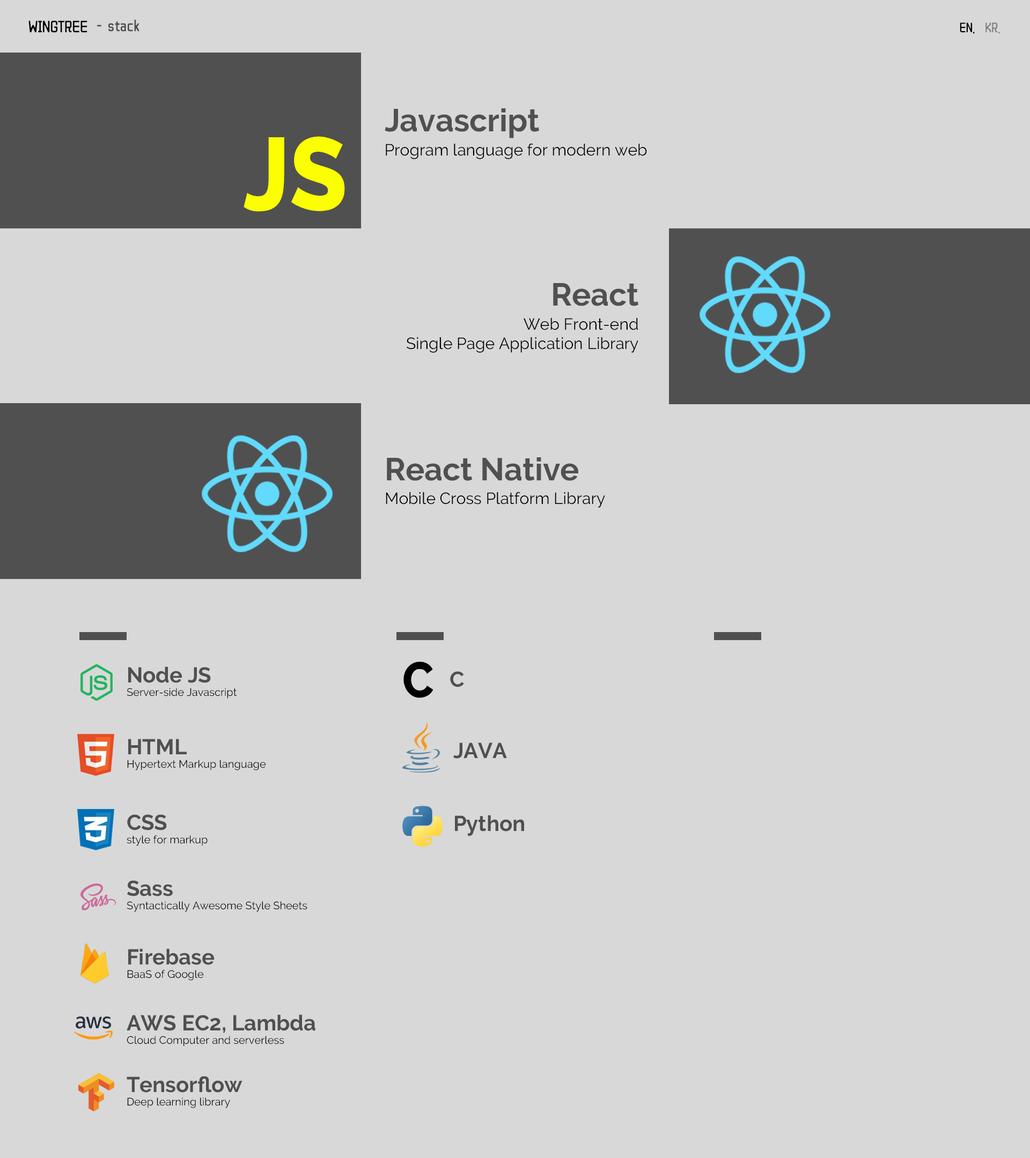
<style>
.page{position:relative;width:1030px;height:1158px;background:#d8d8d8}
.page>*{position:absolute;margin:0}
.t1{font:16.1px "ZCOOLQingKeHuangYou-Regular";color:#000000}
.t2{font:16.1px "ZCOOLQingKeHuangYou-Regular";color:#505050}
.t3{font:13.4px "ZCOOLQingKeHuangYou-Regular";color:#000000}
.t4{font:13.4px "ZCOOLQingKeHuangYou-Regular";color:#808080}
.t5{font:31.6px "Raleway-Bold";color:#505050}
.t6{font:102.6px "Raleway-ExtraBold";color:#fcff00;scale:0.91 1}
.t7{font:16.1px "Raleway-Regular";color:#000000}
.t8{font:50.1px "Raleway-ExtraBold";color:#000000;scale:0.91 1}
.t9{font:21.4px "Raleway-Bold";color:#505050}
.t10{font:10.7px "Raleway-Regular";color:#000000}
</style>
<div class="page">
<p class="t1" style="left:28px;top:20px;width:59px;height:13px">WINGTREE</p>
<p class="t2" style="left:97px;top:19px;width:42px;height:13px">-  stack</p>
<p class="t3" style="left:959px;top:23px;width:41px;height:11px">EN.    <span class="t4">KR.</span></p>
<p class="t5" style="left:384px;top:108px;width:155px;height:30px">Javascript</p>
<p class="t6" style="left:243px;top:136px;width:102px;height:76px">JS</p>
<p class="t7" style="left:386px;top:143px;width:261px;height:16px">Program language for modern web</p>
<p class="t5" style="left:553px;top:283px;width:86px;height:23px">React</p>
<p class="t7" style="left:406px;top:318px;width:232px;height:35px;text-align:right">Web Front-end<br>Single Page Application Library</p>
<p class="t5" style="left:387px;top:457px;width:191px;height:24px">React Native</p>
<p class="t7" style="left:386px;top:492px;width:219px;height:16px">Mobile Cross Platform Library</p>
<p class="t8" style="left:403px;top:662px;width:30px;height:36px">C</p>
<p class="t9" style="left:128px;top:667px;width:83px;height:16px">Node JS</p>
<p class="t9" style="left:450px;top:671px;width:14px;height:16px">C</p>
<p class="t10" style="left:127px;top:688px;width:110px;height:11px">Server-side Javascript</p>
<p class="t9" style="left:128px;top:739px;width:59px;height:15px">HTML</p>
<p class="t9" style="left:453px;top:743px;width:54px;height:16px">JAVA</p>
<p class="t10" style="left:127px;top:760px;width:139px;height:11px">Hypertext Markup language</p>
<p class="t9" style="left:127px;top:815px;width:40px;height:16px">CSS</p>
<p class="t9" style="left:455px;top:815px;width:69px;height:21px">Python</p>
<p class="t10" style="left:127px;top:835px;width:81px;height:11px">style for markup</p>
<p class="t9" style="left:127px;top:880px;width:46px;height:17px">Sass</p>
<p class="t10" style="left:127px;top:901px;width:180px;height:11px">Syntactically Awesome Style Sheets</p>
<p class="t9" style="left:128px;top:949px;width:86px;height:16px">Firebase</p>
<p class="t10" style="left:127px;top:970px;width:77px;height:11px">BaaS of Google</p>
<p class="t9" style="left:127px;top:1015px;width:188px;height:18px">AWS EC2, Lambda</p>
<p class="t10" style="left:127px;top:1036px;width:157px;height:11px">Cloud Computer and serverless</p>
<p class="t9" style="left:127px;top:1076px;width:115px;height:17px">Tensorflow</p>
<p class="t10" style="left:127px;top:1098px;width:103px;height:10px">Deep learning library</p>
</div>
